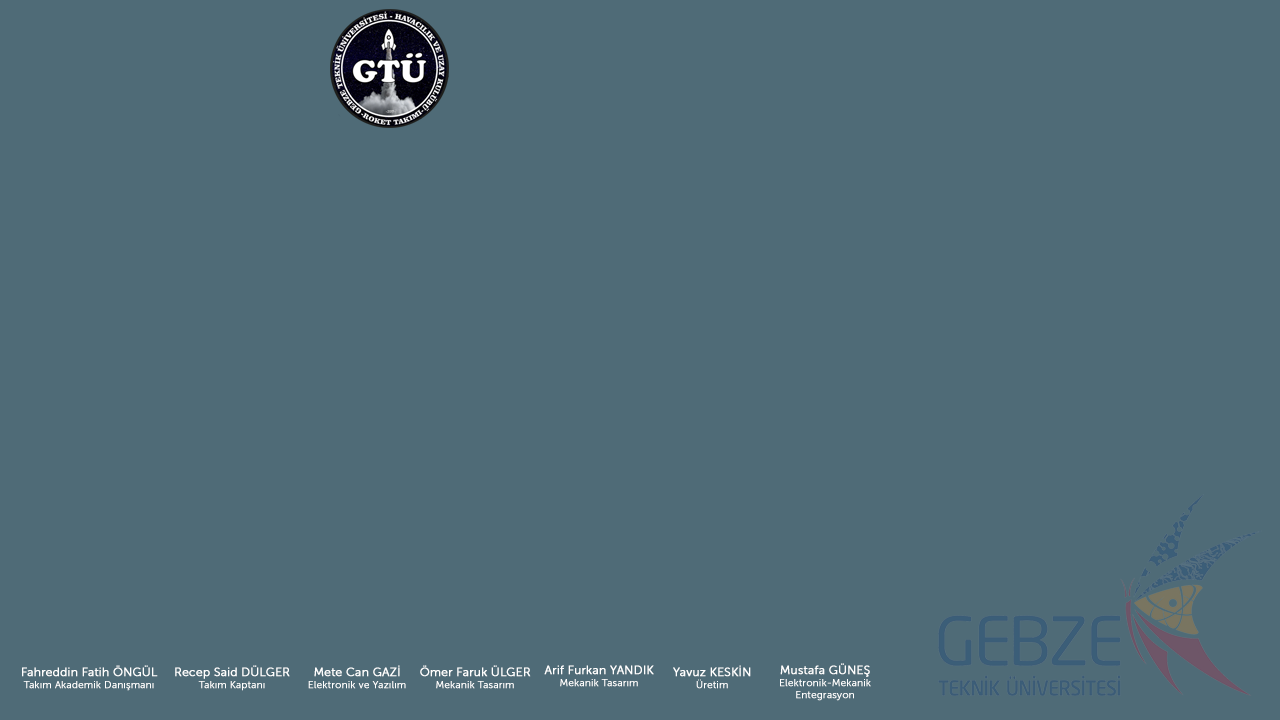
<style>
.page{position:relative;width:1280px;height:720px;background:#4f6b77}
.page>*{position:absolute;margin:0}
.t1{font:10px "MuseoSansForDell";color:#ffffff;font-weight:bold}
.t2{font:12px "MuseoSansForDell";color:#ffffff;font-weight:bold}
</style>
<div class="page">
<p class="t1" style="left:22px;top:665px;width:136px;height:26px;text-align:center"><span class="t2">Fahreddin Fatih ÖNGÜL<br></span>Takım Akademik Danışmanı</p>
<p class="t2" style="left:175px;top:665px;width:115px;height:26px;text-align:center">Recep Said DÜLGER<br><span class="t1">Takım Kaptanı</span></p>
<p class="t1" style="left:308px;top:665px;width:98px;height:24px;text-align:center"><span class="t2">Mete Can GAZİ<br></span>Elektronik ve Yazılım</p>
<p class="t2" style="left:420px;top:665px;width:111px;height:24px;text-align:center">Ömer Faruk ÜLGER<br><span class="t1">Mekanik Tasarım</span></p>
<p class="t2" style="left:544px;top:665px;width:110px;height:22px;text-align:center">Arif Furkan YANDIK<br><span class="t1">Mekanik Tasarım</span></p>
<p class="t2" style="left:673px;top:665px;width:78px;height:24px;text-align:center">Yavuz KESKİN<br><span class="t1">Üretim</span></p>
<p class="t1" style="left:780px;top:663px;width:91px;height:38px;text-align:center"><span class="t2">Mustafa GÜNEŞ<br></span>Elektronik-Mekanik<br>Entegrasyon</p>
</div>
